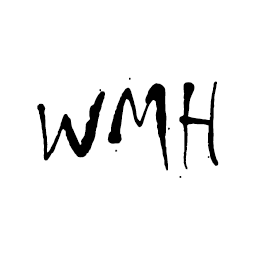
<style>
.page{position:relative;width:256px;height:256px;background:#ffffff}
.page>*{position:absolute;margin:0}
.t1{font:120px "Chiller-Regular";color:#000000}
</style>
<div class="page">
<p class="t1" style="left:37px;top:77px;width:182px;height:101px">WMH</p>
</div>
